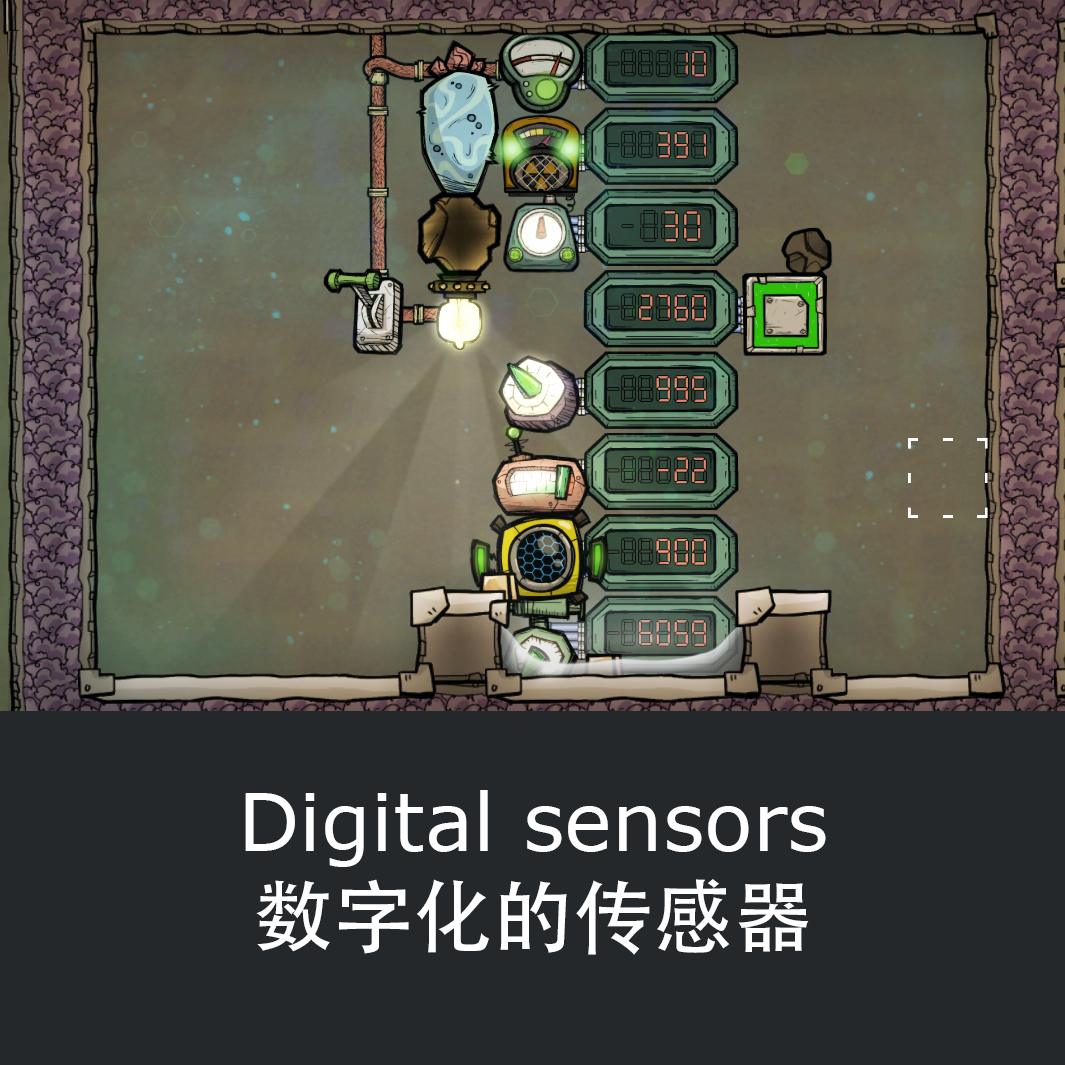
<style>
.page{position:relative;width:1065px;height:1065px;background:#25282b}
.page>*{position:absolute;margin:0}
.t1{font:80px/48px "Verdana";color:#ffffff}
.t2{font:80px/48px "AdobeHeitiStd-Regular";color:#ffffff}
</style>
<div class="page">
<p class="t1" style="left:245px;top:790px;width:581px;height:165px;text-align:center">Digital sensors<br><br><span class="t2">数字化的传感器</span></p>
</div>
